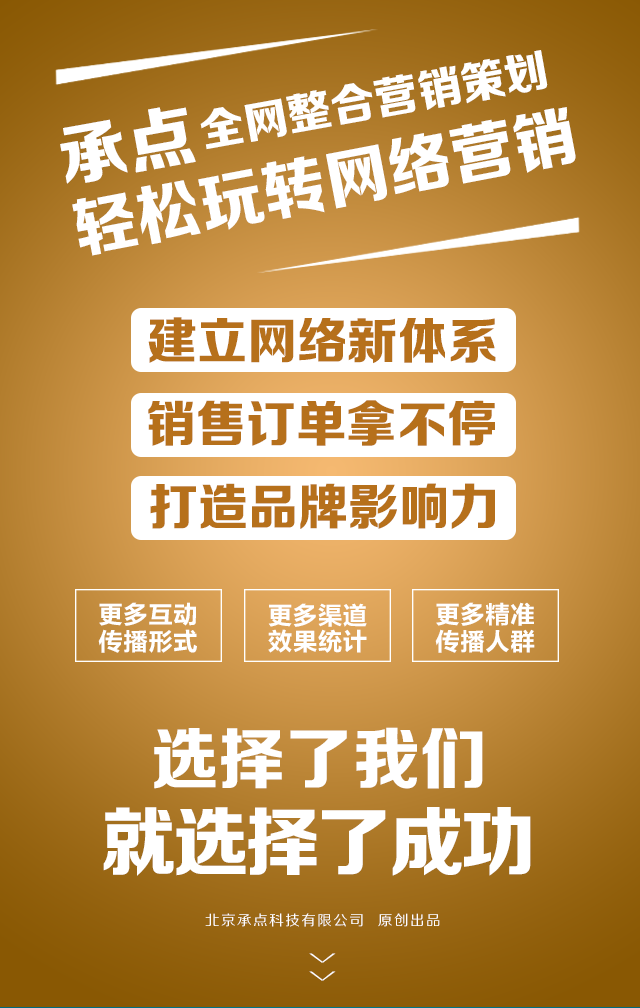
<style>
.page{position:relative;width:640px;height:1008px}
.page>*{position:absolute;margin:0}
.t1{font:43.9px "FZZDHJW--GB1-0";letter-spacing:0.005em;color:#ffffff;text-transform:uppercase}
.t2{font:67.7px "FZZDHJW--GB1-0";letter-spacing:0.005em;color:#ffffff;text-transform:uppercase}
.t3{font:64.7px "FZZDHJW--GB1-0";letter-spacing:0.005em;color:#ffffff;text-transform:uppercase}
.t4{font:50px "FZZDHJW--GB1-0";color:#b6701b;text-transform:uppercase}
.t5{font:25px/26.8px "FZLTCHK--GBK1-0";color:#ffffff;text-transform:uppercase}
.t6{font:66.9px "FZZDHJW--GB1-0";color:#ffffff;text-transform:uppercase}
.t7{font:75.3px "FZZDHJW--GB1-0";letter-spacing:-0.05em;color:#ffffff;text-transform:uppercase}
.t8{font:14.2px "FZZHJW--GB1-0";letter-spacing:0.1em;color:#ffffff;text-transform:uppercase}
.t9{font:36.8px "FZZXHJW--GB1-0";letter-spacing:0.5em;color:#ffffff;text-transform:uppercase;scale:0.44 1}
</style>
<div class="page">
<p class="t1" style="left:200px;top:50px;width:348px;height:100px;rotate:-10deg">全网整合营销策划</p>
<p class="t2" style="left:60px;top:107px;width:136px;height:77px;rotate:-10deg">承点</p>
<p class="t3" style="left:72px;top:107px;width:504px;height:149px;rotate:-11deg">轻松玩转网络营销</p>
<p class="t4" style="left:148px;top:317px;width:348px;height:47px">建立网络新体系</p>
<p class="t4" style="left:148px;top:400px;width:347px;height:46px">销售订单拿不停</p>
<p class="t4" style="left:150px;top:483px;width:345px;height:46px">打造品牌影响力</p>
<p class="t5" style="left:98px;top:602px;width:99px;height:51px;text-align:center">更多互动<br>传播形式</p>
<p class="t5" style="left:268px;top:603px;width:99px;height:50px;text-align:center">更多渠道<br>效果统计</p>
<p class="t5" style="left:435px;top:602px;width:100px;height:51px;text-align:center">更多精准<br>传播人群</p>
<p class="t6" style="left:154px;top:727px;width:329px;height:62px">选择了我们</p>
<p class="t7" style="left:103px;top:807px;width:428px;height:69px">就选择了成功</p>
<p class="t8" style="left:205px;top:913px;width:235px;height:14px">北京承点科技有限公司  原创出品</p>
<p class="t9" style="left:309px;top:953px;width:27px;height:28px;rotate:90deg">&gt;&gt;</p>
</div>
